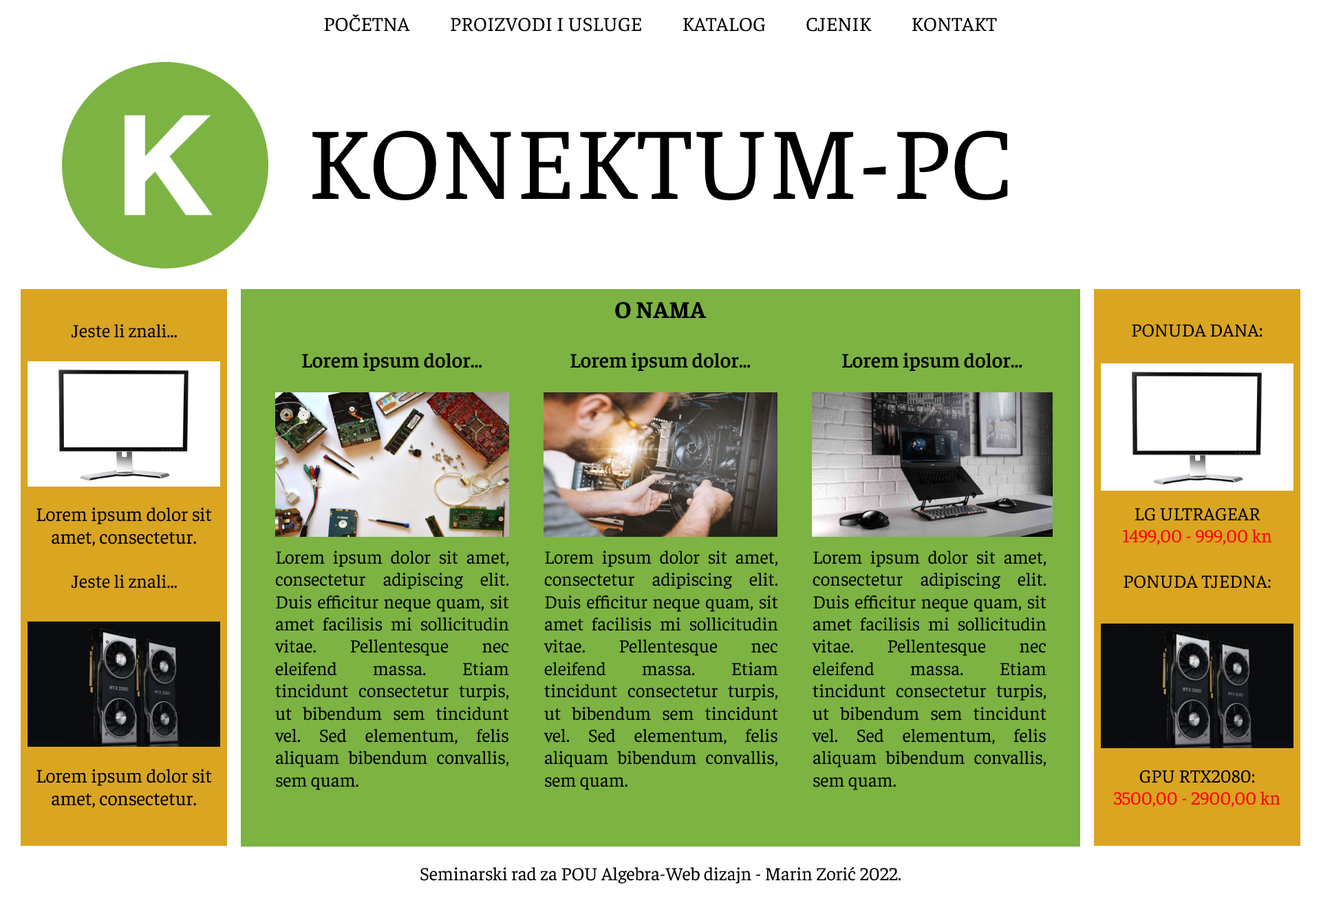
<style>
.page{position:relative;width:1321px;height:903px;background:#ffffff}
.page>*{position:absolute;margin:0}
.t1{font:20px "Faustina-Regular";color:#000000}
.t2{font:103.2px "Faustina-Regular";color:#000000}
.t3{font:24.1px "Faustina-Bold";color:#000000}
.t4{font:18.6px "Faustina-Regular";color:#000000}
.t5{font:20.6px "Faustina-SemiBold";color:#000000}
.t6{font:19.3px "Faustina-Regular";color:#000000}
.t7{font:18.6px "Faustina-Regular";color:#ff0000}
</style>
<div class="page">
<p class="t1" style="left:324px;top:14px;width:673px;height:18px">POČETNA          PROIZVODI I USLUGE          KATALOG          CJENIK          KONTAKT</p>
<p class="t2" style="left:312px;top:131px;width:696px;height:69px">KONEKTUM-PC</p>
<p class="t3" style="left:615px;top:301px;width:92px;height:18px">O NAMA</p>
<p class="t4" style="left:71px;top:324px;width:106px;height:14px">Jeste li znali...</p>
<p class="t4" style="left:1132px;top:324px;width:131px;height:13px">PONUDA DANA:</p>
<p class="t5" style="left:302px;top:352px;width:180px;height:19px">Lorem ipsum dolor...</p>
<p class="t5" style="left:570px;top:352px;width:181px;height:19px">Lorem ipsum dolor...</p>
<p class="t5" style="left:842px;top:352px;width:180px;height:19px">Lorem ipsum dolor...</p>
<p class="t6" style="left:36px;top:507px;width:176px;height:39px;text-align:center">Lorem ipsum dolor sit amet, consectetur.</p>
<p class="t7" style="left:1123px;top:508px;width:149px;height:37px;text-align:center"><span class="t4">LG ULTRAGEAR<br></span>1499,00 - 999,00 kn</p>
<p class="t4" style="left:275px;top:550px;width:234px;height:240px;text-align:justify">Lorem ipsum dolor sit amet, consectetur adipiscing elit. Duis efficitur neque quam, sit amet facilisis mi sollicitudin vitae. Pellentesque nec eleifend massa. Etiam tincidunt consectetur turpis, ut bibendum sem tincidunt vel. Sed elementum, felis aliquam bibendum convallis, sem quam.</p>
<p class="t4" style="left:544px;top:550px;width:234px;height:240px;text-align:justify">Lorem ipsum dolor sit amet, consectetur adipiscing elit. Duis efficitur neque quam, sit amet facilisis mi sollicitudin vitae. Pellentesque nec eleifend massa. Etiam tincidunt consectetur turpis, ut bibendum sem tincidunt vel. Sed elementum, felis aliquam bibendum convallis, sem quam.</p>
<p class="t4" style="left:812px;top:550px;width:234px;height:240px;text-align:justify">Lorem ipsum dolor sit amet, consectetur adipiscing elit. Duis efficitur neque quam, sit amet facilisis mi sollicitudin vitae. Pellentesque nec eleifend massa. Etiam tincidunt consectetur turpis, ut bibendum sem tincidunt vel. Sed elementum, felis aliquam bibendum convallis, sem quam.</p>
<p class="t4" style="left:72px;top:574px;width:105px;height:14px">Jeste li znali...</p>
<p class="t4" style="left:1124px;top:575px;width:147px;height:13px">PONUDA TJEDNA:</p>
<p class="t6" style="left:36px;top:769px;width:176px;height:39px;text-align:center">Lorem ipsum dolor sit amet, consectetur.</p>
<p class="t7" style="left:1114px;top:770px;width:166px;height:37px;text-align:center"><span class="t4">GPU RTX2080:<br></span>3500,00 - 2900,00 kn</p>
<p class="t4" style="left:420px;top:866px;width:481px;height:17px">Seminarski rad za POU Algebra-Web dizajn - Marin Zorić 2022.</p>
</div>
